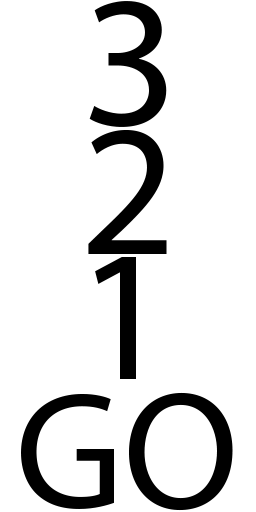
<style>
.page{position:relative;width:256px;height:512px;background:#ffffff}
.page>*{position:absolute;margin:0}
.t1{font:188.2px "MyriadPro-Regular";color:#000000}
.t2{font:167.7px "MyriadPro-Regular";color:#000000}
</style>
<div class="page">
<p class="t1" style="left:89px;top:1px;width:78px;height:126px">3</p>
<p class="t1" style="left:88px;top:130px;width:79px;height:124px">2</p>
<p class="t1" style="left:95px;top:257px;width:41px;height:122px">1</p>
<p class="t2" style="left:21px;top:392px;width:212px;height:119px">GO</p>
</div>
